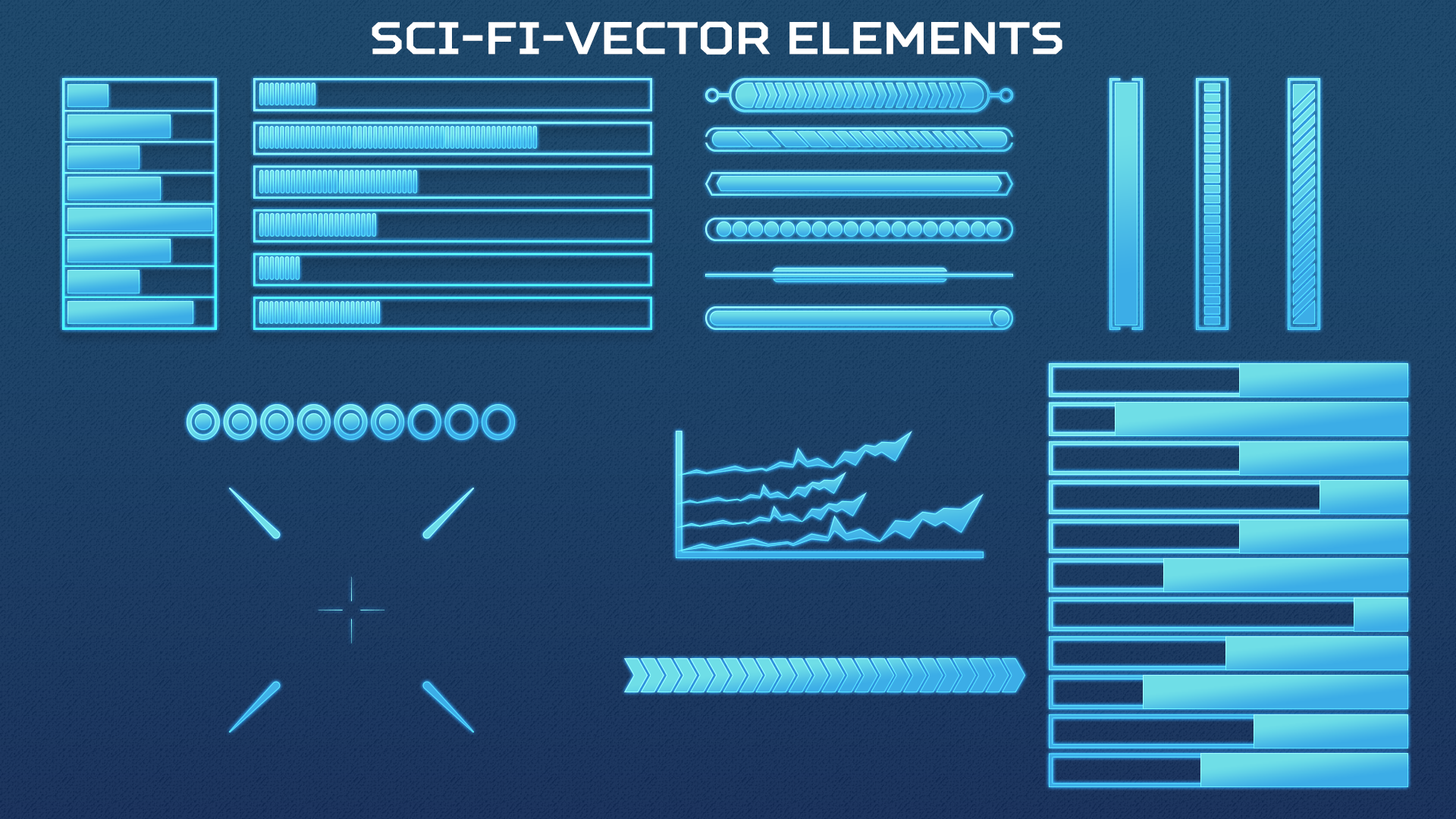
<style>
.page{position:relative;width:1456px;height:819px}
.page>*{position:absolute;margin:0}
.t1{font:45.5px "SquaresBold";color:#ffffff}
</style>
<div class="page">
<p class="t1" style="left:372px;top:21px;width:690px;height:34px">sci-fi-vector elements</p>
</div>
